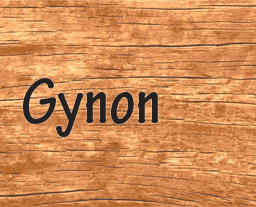
<style>
.page{position:relative;width:256px;height:207px}
.page>*{position:absolute;margin:0}
.t1{font:68.2px "TektonPro-BoldCond";color:#252121}
</style>
<div class="page">
<p class="t1" style="left:23px;top:78px;width:135px;height:59px">Gynon</p>
</div>
